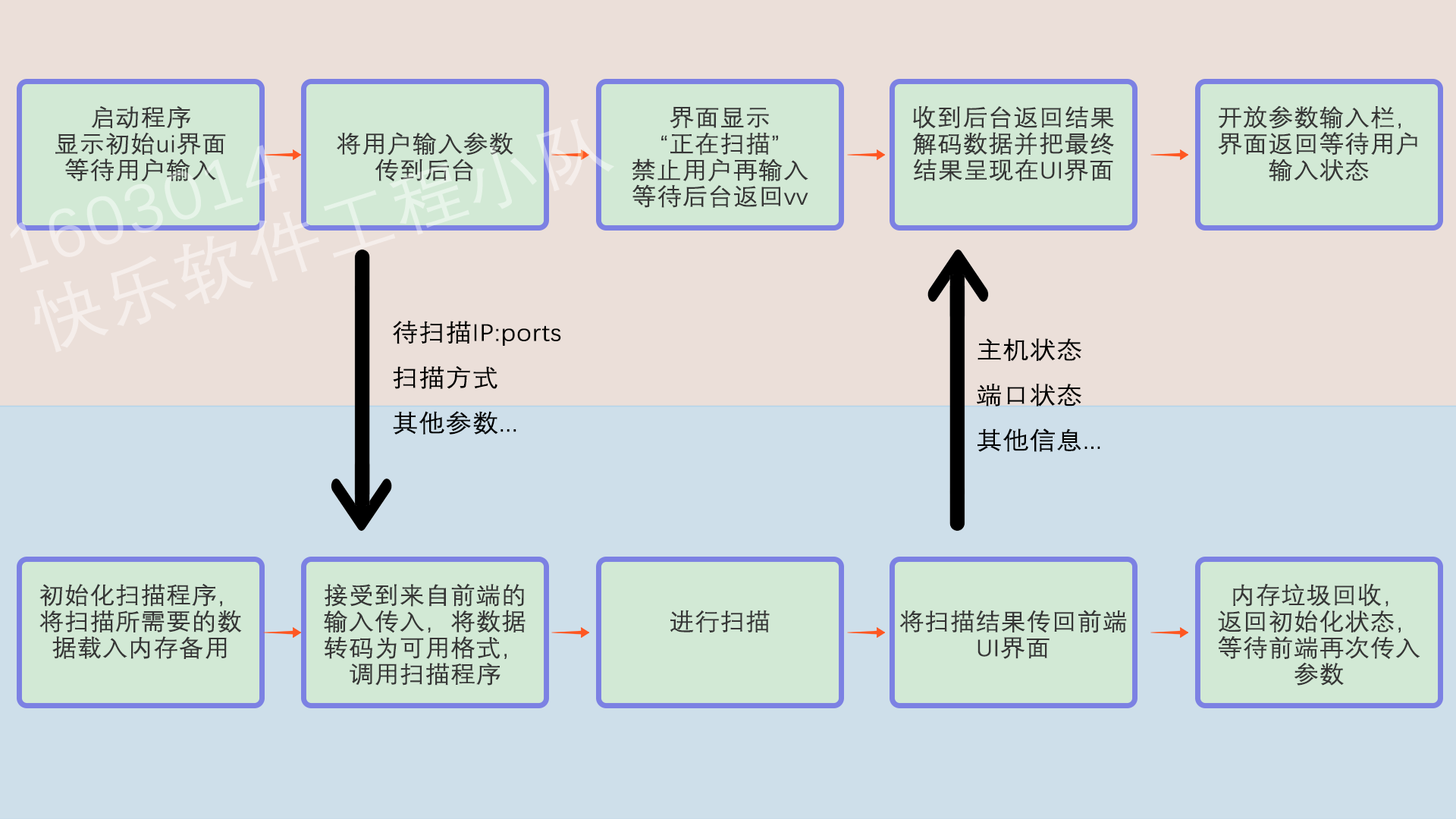
<style>
.page{position:relative;width:1456px;height:819px;background:#cedfea}
.page>*{position:absolute;margin:0}
.t1{font:23.5px/26.3px "DengXian";color:#363636;font-weight:bold;scale:1.05 1}
.t2{font:24px/45.3px "DengXian";color:#000000;font-weight:bold;scale:1.08 1}
.t3{font:23.5px "DengXian";color:#363636;font-weight:bold;scale:1.05 1}
</style>
<div class="page">
<p class="t1" style="left:55px;top:105px;width:171px;height:77px;text-align:center">启动程序<br>显示初始ui界面<br>等待用户输入</p>
<p class="t1" style="left:632px;top:106px;width:176px;height:102px;text-align:center">界面显示<br>“正在扫描”<br>禁止用户再输入<br>等待后台返回vv</p>
<p class="t1" style="left:912px;top:105px;width:202px;height:76px;text-align:center">收到后台返回结果<br>解码数据并把最终<br>结果呈现在UI界面</p>
<p class="t1" style="left:1218px;top:105px;width:199px;height:76px;text-align:center">开放参数输入栏，<br>界面返回等待用户<br>输入状态</p>
<p class="t1" style="left:337px;top:132px;width:176px;height:49px;text-align:center">将用户输入参数<br>传到后台</p>
<p class="t2" style="left:393px;top:321px;width:168px;height:114px">待扫描IP:ports<br>扫描方式<br>其他参数...</p>
<p class="t2" style="left:977px;top:338px;width:123px;height:114px">主机状态<br>端口状态<br>其他信息...</p>
<p class="t1" style="left:39px;top:583px;width:203px;height:76px;text-align:center">初始化扫描程序，<br>将扫描所需要的数<br>据载入内存备用</p>
<p class="t1" style="left:324px;top:583px;width:202px;height:103px;text-align:center">接受到来自前端的<br>输入传入，将数据<br>转码为可用格式，<br>调用扫描程序</p>
<p class="t1" style="left:1218px;top:583px;width:202px;height:103px;text-align:center">内存垃圾回收，<br>返回初始化状态，<br>等待前端再次传入<br>参数</p>
<p class="t3" style="left:670px;top:610px;width:100px;height:22px">进行扫描</p>
<p class="t1" style="left:899px;top:610px;width:228px;height:49px;text-align:center">将扫描结果传回前端<br>UI界面</p>
</div>
